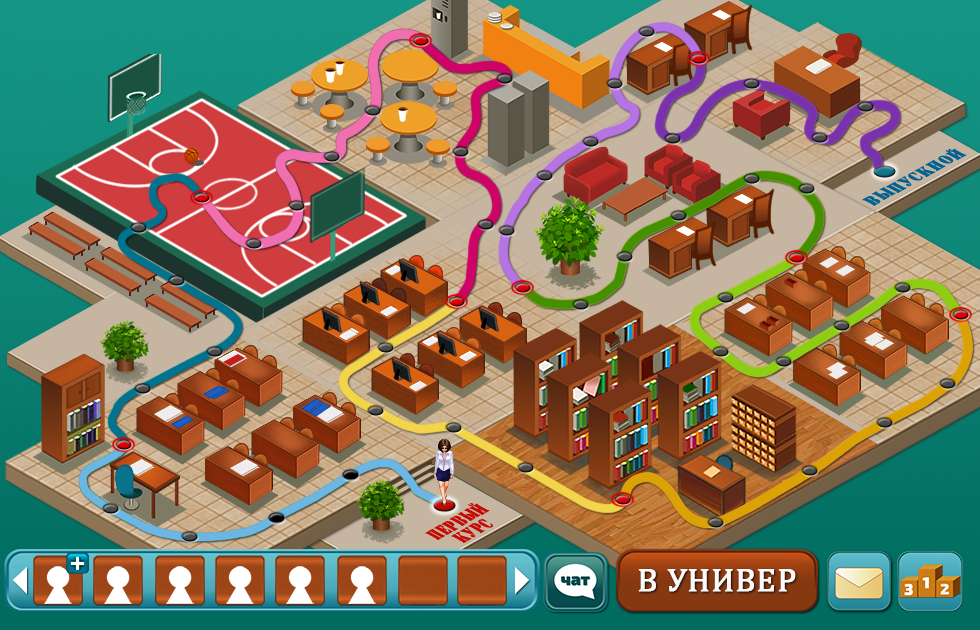
<style>
.page{position:relative;width:980px;height:630px}
.page>*{position:absolute;margin:0}
.t1{font:18px "AStamperBold";letter-spacing:0.05em;color:#036191;font-weight:bold;scale:0.8 1}
.t2{font:20px/18px "AStamperBold";letter-spacing:0.05em;color:#c60802;font-weight:bold;scale:0.61 1}
.t3{font:33.3px "Cambria";color:#fcfaf9;font-weight:bold}
</style>
<div class="page">
<p class="t1" style="left:862px;top:148px;width:105px;height:58px;rotate:-29deg">Выпускной</p>
<p class="t2" style="left:425px;top:503px;width:68px;height:40px;text-align:center;rotate:-30deg">первый<br>курс</p>
<p class="t3" style="left:638px;top:569px;width:158px;height:23px">В УНИВЕР</p>
</div>
